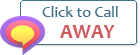
<style>
.page{position:relative;width:140px;height:55px;background:#ffffff}
.page>*{position:absolute;margin:0}
.t1{font:16px "Candara";color:#40738b}
.t2{font:20px "Candara-Bold";color:#cf5d60}
</style>
<div class="page">
<p class="t1" style="left:42px;top:6px;width:76px;height:11px">Click to Call</p>
<p class="t2" style="left:60px;top:25px;width:55px;height:13px">AWAY</p>
</div>
